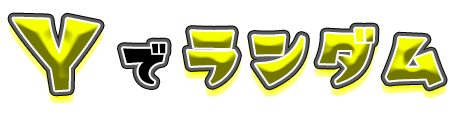
<style>
.page{position:relative;width:460px;height:115px;background:#ffffff}
.page>*{position:absolute;margin:0}
.t1{font:66.7px "Memoir-Square";color:#000000}
.t2{font:12px "Memoir-Square";color:#000000}
</style>
<div class="page">
<p class="t1" style="left:187px;top:28px;width:255px;height:58px">ランダム</p>
<p class="t2" style="left:122px;top:43px;width:44px;height:41px">で</p>
</div>
